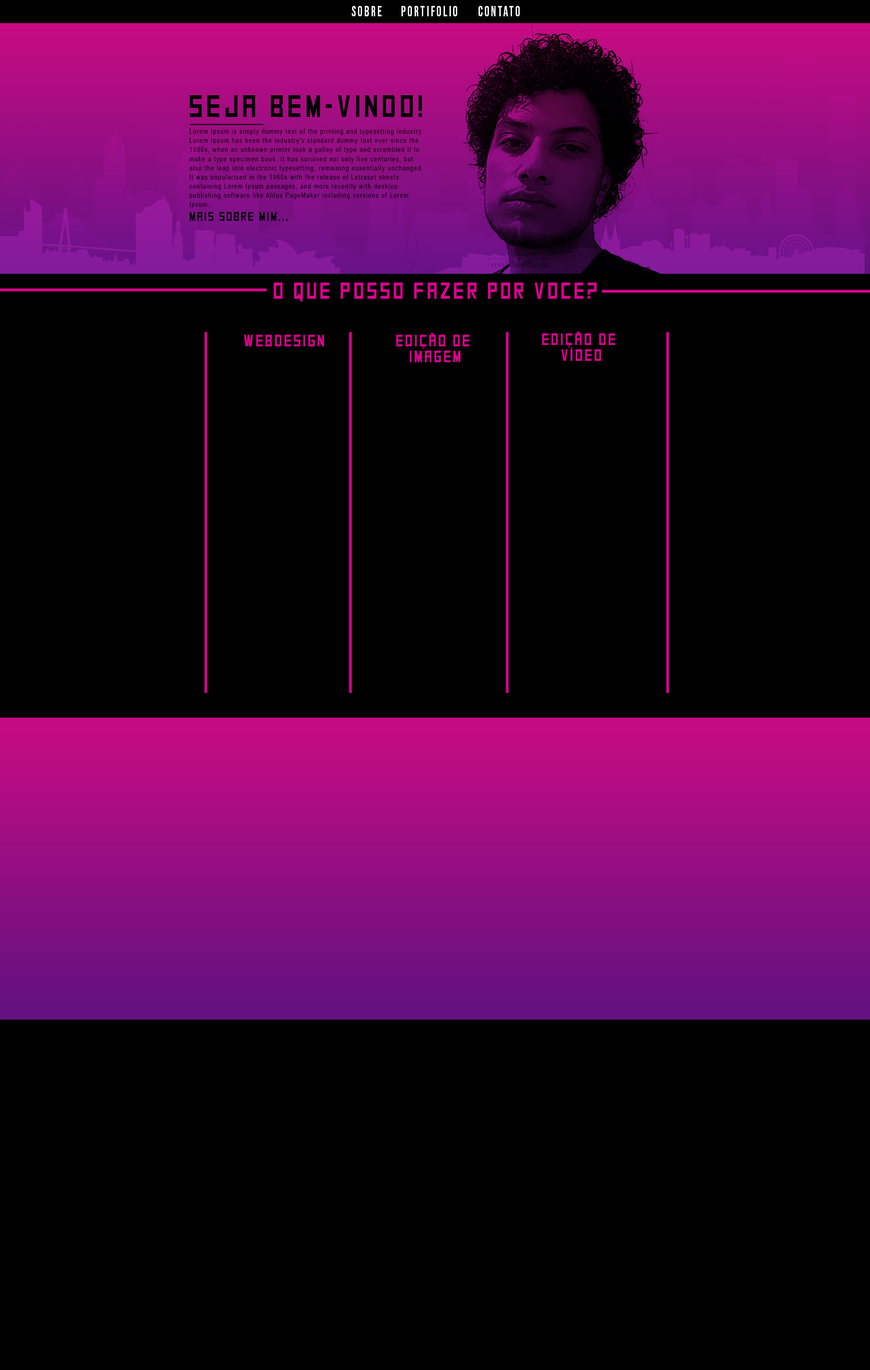
<style>
.page{position:relative;width:870px;height:1370px;background:#000000}
.page>*{position:absolute;margin:0}
.t1{font:14.8px "BebasNeue-Regular";letter-spacing:0.14em;color:#ffffff;scale:0.81 1}
.t2{font:31.1px "SquareFont";letter-spacing:0.14em;color:#000000;scale:0.8 1}
.t3{font:9.4px "SquareFont";letter-spacing:0.14em;color:#000000;scale:30.93 1}
.t4{font:6.8px/9.1px "ArialMT";letter-spacing:0.14em;color:#000000;scale:0.8 1}
.t5{font:12.6px "SquareFont";letter-spacing:0.14em;color:#000000;scale:0.8 1}
.t6{font:23.1px "SquareFont";letter-spacing:0.14em;color:#dd0091;scale:0.8 1}
.t7{font:22.5px "SquareFont";letter-spacing:0.14em;color:#dd0091;scale:63.01 1}
.t8{font:16.4px "SquareFont";letter-spacing:0.14em;color:#dd0091;scale:0.8 1}
.t9{font:16.4px/16.1px "SquareFont";letter-spacing:0.14em;color:#dd0091;scale:0.8 1}
</style>
<div class="page">
<p class="t1" style="left:352px;top:6px;width:30px;height:10px">SOBRE</p>
<p class="t1" style="left:402px;top:6px;width:55px;height:10px">PORTIFOLIO</p>
<p class="t1" style="left:479px;top:6px;width:41px;height:10px">CONTATO</p>
<p class="t2" style="left:189px;top:95px;width:233px;height:22px">SEJA BEM-VINDO!</p>
<p class="t3" style="left:190px;top:124px;width:74px;height:1px">-</p>
<p class="t4" style="left:189px;top:129px;width:234px;height:79px">Lorem Ipsum is simply dummy text of the printing and typesetting industry. Lorem Ipsum has been the industry's standard dummy text ever since the 1500s, when an unknown printer took a galley of type and scrambled it to make a type specimen book. It has survived not only five centuries, but also the leap into electronic typesetting, remaining essentially unchanged. It was popularised in the 1960s with the release of Letraset sheets containing Lorem Ipsum passages, and more recently with desktop publishing software like Aldus PageMaker including versions of Lorem Ipsum.</p>
<p class="t5" style="left:189px;top:212px;width:99px;height:9px">MAIS SOBRE MIM...</p>
<p class="t6" style="left:274px;top:282px;width:323px;height:19px">O QUE POSSO FAZER POR VOCE?</p>
<p class="t7" style="left:204px;top:332px;width:4px;height:361px;rotate:90deg">-</p>
<p class="t8" style="left:244px;top:335px;width:80px;height:11px">WEBDESIGN</p>
<p class="t7" style="left:349px;top:332px;width:3px;height:361px;rotate:90deg">-</p>
<p class="t9" style="left:396px;top:333px;width:74px;height:29px;text-align:center">EDIÇÃO DE<br> IMAGEM</p>
<p class="t7" style="left:506px;top:332px;width:3px;height:361px;rotate:90deg">-</p>
<p class="t9" style="left:542px;top:331px;width:74px;height:30px;text-align:center">EDIÇÃO DE<br> VÍDEO</p>
<p class="t7" style="left:666px;top:332px;width:4px;height:361px;rotate:90deg">-</p>
</div>
